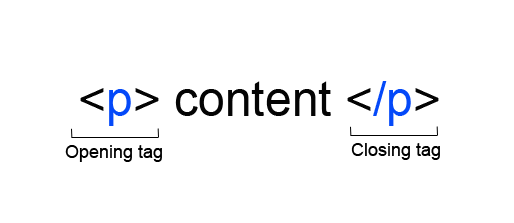
<style>
.page{position:relative;width:514px;height:223px;background:#ffffff}
.page>*{position:absolute;margin:0}
.t1{font:48px "ArialMT";color:#040404}
.t2{font:48px "ArialMT";color:#0449f9}
.t3{font:18px "ArialMT";color:#000000}
</style>
<div class="page">
<p class="t1" style="left:80px;top:81px;width:359px;height:45px">&lt;<span class="t2">p</span>&gt; content &lt;<span class="t2">/p</span>&gt;</p>
<p class="t3" style="left:65px;top:145px;width:97px;height:17px">Opening tag</p>
<p class="t3" style="left:351px;top:143px;width:89px;height:17px">Closing tag</p>
</div>
